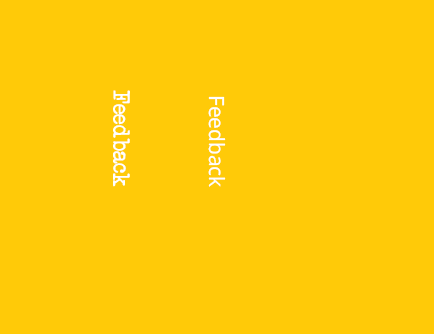
<style>
.page{position:relative;width:434px;height:334px;background:#ffca08}
.page>*{position:absolute;margin:0}
.t1{font:23.2px "AnotherTypewriter";color:#ffffff}
.t2{font:21px "NotoSans";color:#ffffff}
</style>
<div class="page">
<p class="t1" style="left:113px;top:90px;width:17px;height:97px;rotate:90deg">Feedback</p>
<p class="t2" style="left:208px;top:96px;width:18px;height:91px;rotate:90deg">Feedback</p>
</div>
